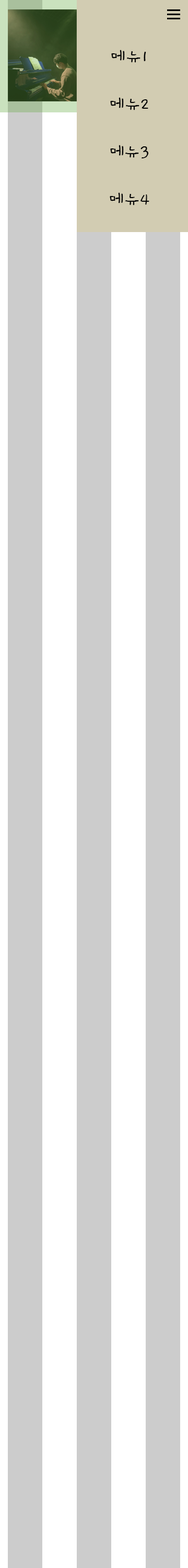
<style>
.page{position:relative;width:188px;height:1568px;background:#cccccc}
.page>*{position:absolute;margin:0}
.t1{font:18.8px "Gaegu-Regular";color:#040404}
</style>
<div class="page">
<p class="t1" style="left:111px;top:50px;width:35px;height:13px">메뉴1</p>
<p class="t1" style="left:110px;top:97px;width:38px;height:13px">메뉴2</p>
<p class="t1" style="left:110px;top:145px;width:39px;height:13px">메뉴3</p>
<p class="t1" style="left:110px;top:192px;width:39px;height:13px">메뉴4</p>
</div>
